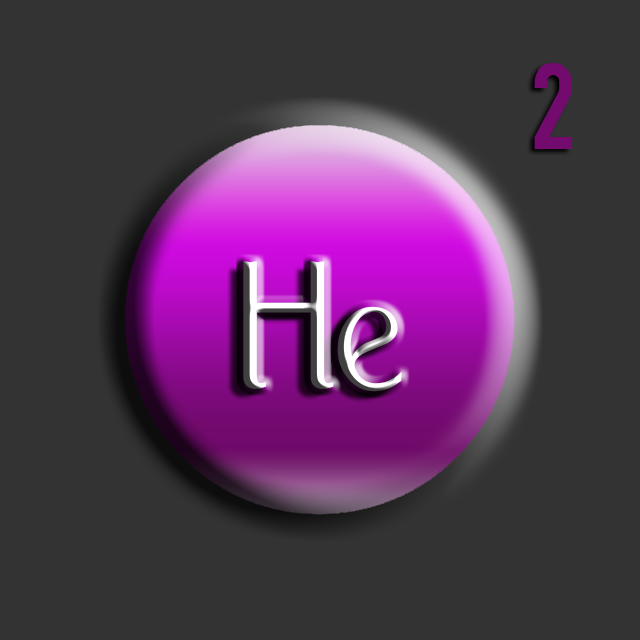
<style>
.page{position:relative;width:640px;height:640px;background:#333333}
.page>*{position:absolute;margin:0}
.t1{font:129px "TGL0-1451Engschrift";color:#730a6e}
.t2{font:194px "PortCredit-Regular"}
</style>
<div class="page">
<p class="t1" style="left:534px;top:63px;width:38px;height:86px">2</p>
<p class="t2" style="left:243px;top:261px;width:159px;height:131px">He</p>
</div>
